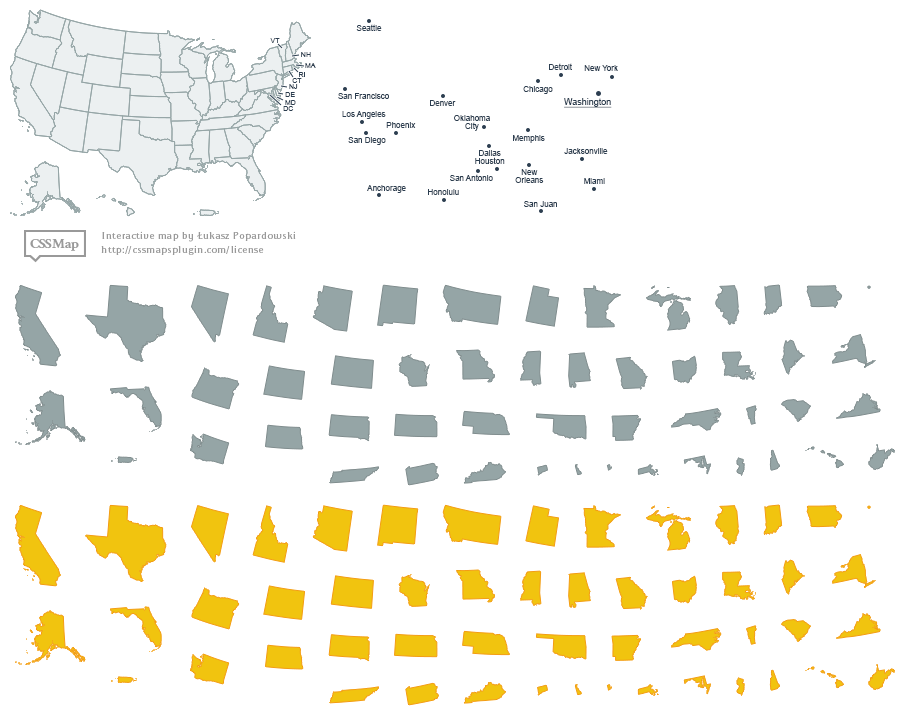
<style>
.page{position:relative;width:910px;height:720px;background:#ffffff}
.page>*{position:absolute;margin:0}
.t1{font:8px "ArialMT";color:#2c3e50}
.t2{font:7px "ArialMT";color:#2c3e50}
.t3{font:9px "ArialMT";color:#2c3e50;text-decoration:underline}
.t4{font:8px/8px "ArialMT";color:#2c3e50}
</style>
<div class="page">
<p class="t1" style="left:356px;top:24px;width:26px;height:7px">Seattle</p>
<p class="t2" style="left:270px;top:38px;width:10px;height:5px">VT</p>
<p class="t2" style="left:301px;top:52px;width:10px;height:5px">NH</p>
<p class="t2" style="left:305px;top:63px;width:11px;height:5px">MA</p>
<p class="t1" style="left:549px;top:63px;width:23px;height:7px">Detroit</p>
<p class="t1" style="left:584px;top:65px;width:34px;height:6px">New York</p>
<p class="t2" style="left:292px;top:78px;width:10px;height:5px">CT</p>
<p class="t2" style="left:299px;top:72px;width:6px;height:5px">RI</p>
<p class="t2" style="left:289px;top:84px;width:9px;height:5px">NJ</p>
<p class="t1" style="left:523px;top:86px;width:30px;height:8px">Chicago</p>
<p class="t2" style="left:285px;top:100px;width:11px;height:5px">MD</p>
<p class="t2" style="left:285px;top:92px;width:10px;height:5px">DE</p>
<p class="t1" style="left:338px;top:93px;width:51px;height:6px">San Francisco</p>
<p class="t1" style="left:430px;top:100px;width:26px;height:6px">Denver</p>
<p class="t3" style="left:564px;top:98px;width:48px;height:10px">Washington</p>
<p class="t2" style="left:283px;top:106px;width:11px;height:5px">DC</p>
<p class="t1" style="left:342px;top:111px;width:44px;height:8px">Los Angeles</p>
<p class="t1" style="left:386px;top:122px;width:30px;height:6px">Phoenix</p>
<p class="t4" style="left:454px;top:115px;width:36px;height:16px;text-align:center">Oklahoma<br>City</p>
<p class="t1" style="left:348px;top:137px;width:38px;height:8px">San Diego</p>
<p class="t1" style="left:513px;top:135px;width:32px;height:8px">Memphis</p>
<p class="t1" style="left:479px;top:150px;width:22px;height:6px">Dallas</p>
<p class="t1" style="left:564px;top:148px;width:44px;height:6px">Jacksonville</p>
<p class="t1" style="left:475px;top:157px;width:30px;height:7px">Houston</p>
<p class="t1" style="left:450px;top:174px;width:43px;height:7px">San Antonio</p>
<p class="t4" style="left:515px;top:169px;width:29px;height:14px;text-align:center">New<br>Orleans</p>
<p class="t1" style="left:367px;top:185px;width:39px;height:8px">Anchorage</p>
<p class="t1" style="left:584px;top:178px;width:21px;height:6px">Miami</p>
<p class="t1" style="left:428px;top:189px;width:31px;height:6px">Honolulu</p>
<p class="t1" style="left:524px;top:201px;width:33px;height:6px">San Juan</p>
</div>
